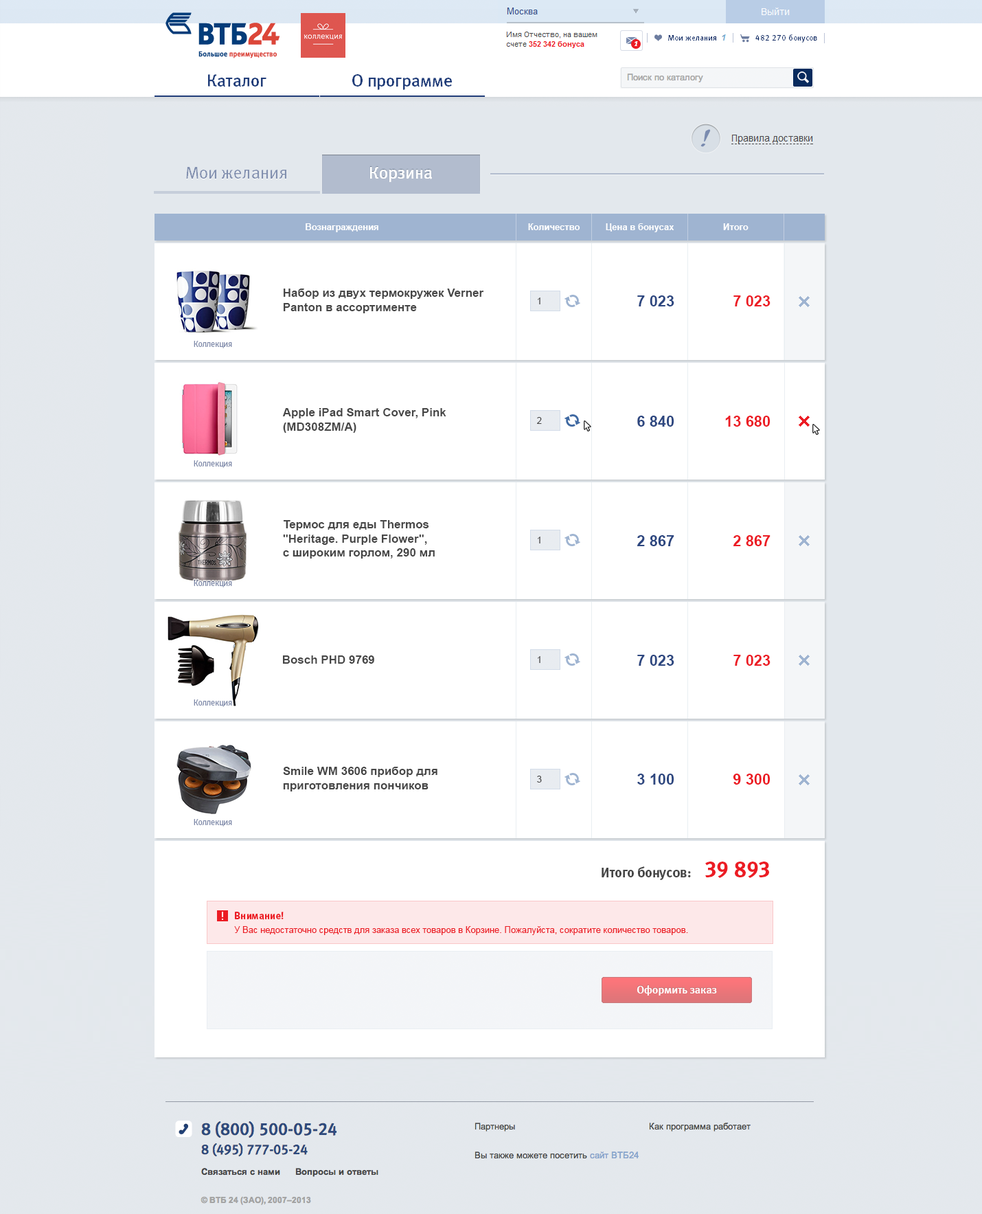
<style>
.page{position:relative;width:982px;height:1214px;background:#ffffff}
.page>*{position:absolute;margin:0}
.t1{font:8.9px "Arial-BoldMT";color:#ffffff}
.t2{font:11.7px "Arial-BoldMT";color:#474747}
.t3{font:8.9px "ArialMT";color:#474747}
.t4{font:15.1px "Arial-BoldMT";color:#2d4780}
.t5{font:15.1px "Arial-BoldMT";color:#ec1c24}
.t6{font:8.2px "MetaBookCyrLF-Roman";color:#828dac}
.t7{font:13.7px "MetaBoldCyrLF-Roman";color:#474747}
.t8{font:22px "MetaBoldCyrLF-Roman";color:#ec1c24}
.t9{font:8.9px/13.7px "ArialMT";color:#ec1c24}
.t10{font:10.3px/13.7px "MetaBoldCyrLF-Roman";color:#ec1c24}
.t11{font:11px "MetaMediumCyrLF-Roman";color:#ffffff}
</style>
<div class="page">
<p class="t1" style="left:306px;top:223px;width:73px;height:9px">Вознаграждения</p>
<p class="t1" style="left:528px;top:223px;width:52px;height:7px">Количество</p>
<p class="t1" style="left:606px;top:223px;width:69px;height:9px">Цена в бонусах</p>
<p class="t1" style="left:723px;top:223px;width:26px;height:7px">Итого</p>
<p class="t2" style="left:284px;top:289px;width:200px;height:24px">Набор из двух термокружек Verner Panton в ассортименте</p>
<p class="t3" style="left:538px;top:297px;width:3px;height:7px">1</p>
<p class="t4" style="left:637px;top:295px;width:38px;height:11px">7 023</p>
<p class="t5" style="left:734px;top:295px;width:37px;height:11px">7 023</p>
<p class="t6" style="left:194px;top:341px;width:38px;height:7px">Коллекция</p>
<p class="t2" style="left:282px;top:408px;width:165px;height:25px">Apple iPad Smart Cover, Pink (MD308ZM/A)</p>
<p class="t3" style="left:537px;top:417px;width:5px;height:7px">2</p>
<p class="t4" style="left:637px;top:416px;width:38px;height:11px">6 840</p>
<p class="t5" style="left:725px;top:416px;width:46px;height:11px">13 680</p>
<p class="t6" style="left:194px;top:460px;width:38px;height:8px">Коллекция</p>
<p class="t2" style="left:283px;top:520px;width:152px;height:38px">Термос для еды Thermos <br>"Heritage. Purple Flower", <br>с широким горлом, 290 мл</p>
<p class="t3" style="left:538px;top:537px;width:3px;height:6px">1</p>
<p class="t4" style="left:637px;top:535px;width:38px;height:11px">2 867</p>
<p class="t5" style="left:733px;top:535px;width:38px;height:11px">2 867</p>
<p class="t6" style="left:194px;top:580px;width:38px;height:7px">Коллекция</p>
<p class="t2" style="left:283px;top:655px;width:91px;height:9px">Bosch PHD 9769</p>
<p class="t3" style="left:538px;top:656px;width:3px;height:7px">1</p>
<p class="t4" style="left:637px;top:655px;width:38px;height:11px">7 023</p>
<p class="t5" style="left:734px;top:655px;width:37px;height:11px">7 023</p>
<p class="t6" style="left:194px;top:699px;width:38px;height:8px">Коллекция</p>
<p class="t2" style="left:283px;top:767px;width:155px;height:24px">Smile WM 3606 прибор для приготовления пончиков</p>
<p class="t4" style="left:637px;top:774px;width:38px;height:11px">3 100</p>
<p class="t5" style="left:733px;top:774px;width:38px;height:11px">9 300</p>
<p class="t3" style="left:537px;top:776px;width:5px;height:6px">3</p>
<p class="t6" style="left:194px;top:819px;width:38px;height:7px">Коллекция</p>
<p class="t7" style="left:602px;top:866px;width:89px;height:14px">Итого бонусов:</p>
<p class="t8" style="left:706px;top:861px;width:63px;height:17px">39 893</p>
<p class="t9" style="left:234px;top:912px;width:454px;height:23px"><span class="t10">Внимание! <br></span>У Вас недостаточно средств для заказа всех товаров в Корзине. Пожалуйста, сократите количество товаров.</p>
<p class="t11" style="left:637px;top:985px;width:80px;height:10px">Оформить заказ</p>
</div>
